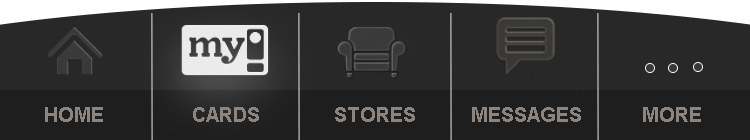
<style>
.page{position:relative;width:750px;height:140px;background:#282828}
.page>*{position:absolute;margin:0}
.t1{font:20px "Arial-BoldMT";color:#8c857f}
</style>
<div class="page">
<p class="t1" style="left:45px;top:107px;width:58px;height:15px">HOME</p>
<p class="t1" style="left:193px;top:107px;width:66px;height:15px">CARDS</p>
<p class="t1" style="left:335px;top:107px;width:80px;height:15px">STORES</p>
<p class="t1" style="left:472px;top:107px;width:109px;height:15px">MESSAGES</p>
<p class="t1" style="left:643px;top:107px;width:58px;height:15px">MORE</p>
</div>
